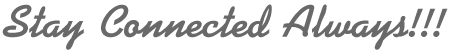
<style>
.page{position:relative;width:450px;height:52px;background:#ffffff}
.page>*{position:absolute;margin:0}
.t1{font:48px "Kaliakra";color:#696969}
</style>
<div class="page">
<p class="t1" style="left:2px;top:4px;width:446px;height:46px">Stay Connected Always!!!</p>
</div>
